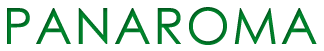
<style>
.page{position:relative;width:324px;height:51px;background:#ffffff}
.page>*{position:absolute;margin:0}
.t1{font:50px "LevenimMT";letter-spacing:0.05em;color:#007b28;text-transform:uppercase}
</style>
<div class="page">
<p class="t1" style="left:7px;top:7px;width:310px;height:38px">Panaroma</p>
</div>
